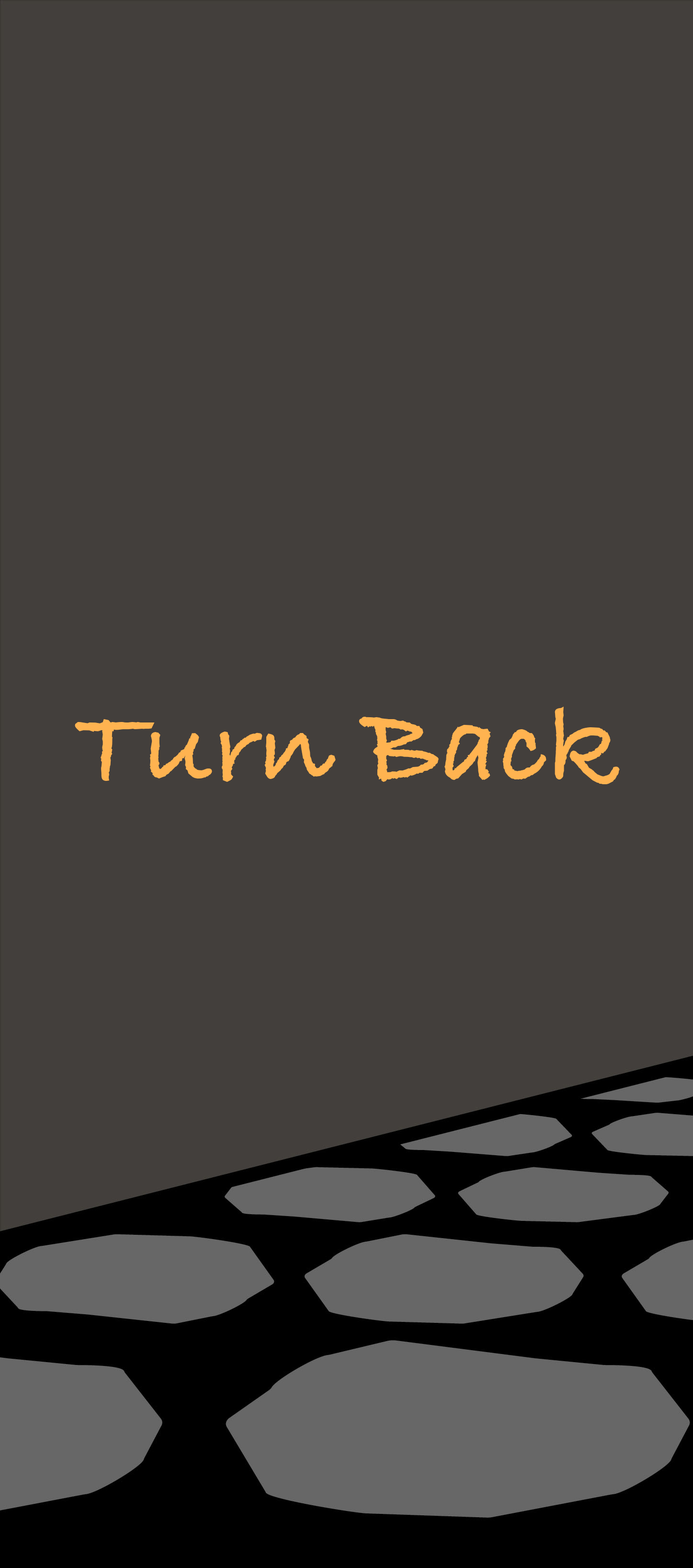
<style>
.page{position:relative;width:693px;height:1568px;background:#433f3c}
.page>*{position:absolute;margin:0}
.t1{font:113.3px "BradleyHandITCTT-Bold";color:#ffb350}
</style>
<div class="page">
<p class="t1" style="left:75px;top:707px;width:545px;height:77px">Turn Back</p>
</div>
